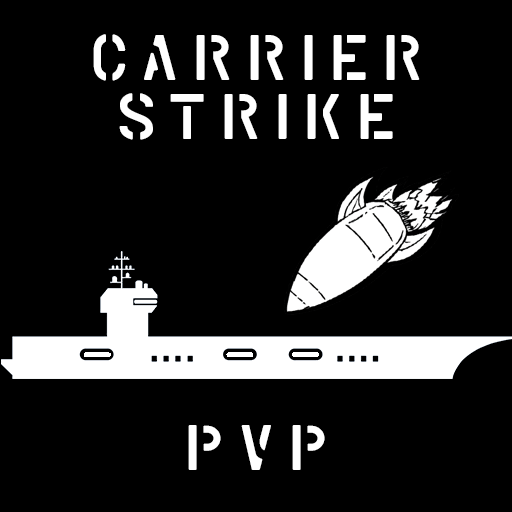
<style>
.page{position:relative;width:512px;height:512px;background:#000000}
.page>*{position:absolute;margin:0}
.t1{font:60px "Marsh-Stencil";letter-spacing:0.2em;color:#ffffff}
</style>
<div class="page">
<p class="t1" style="left:93px;top:34px;width:327px;height:47px">Carrier</p>
<p class="t1" style="left:119px;top:93px;width:274px;height:47px">Strike</p>
<p class="t1" style="left:188px;top:425px;width:137px;height:45px">PvP</p>
</div>
